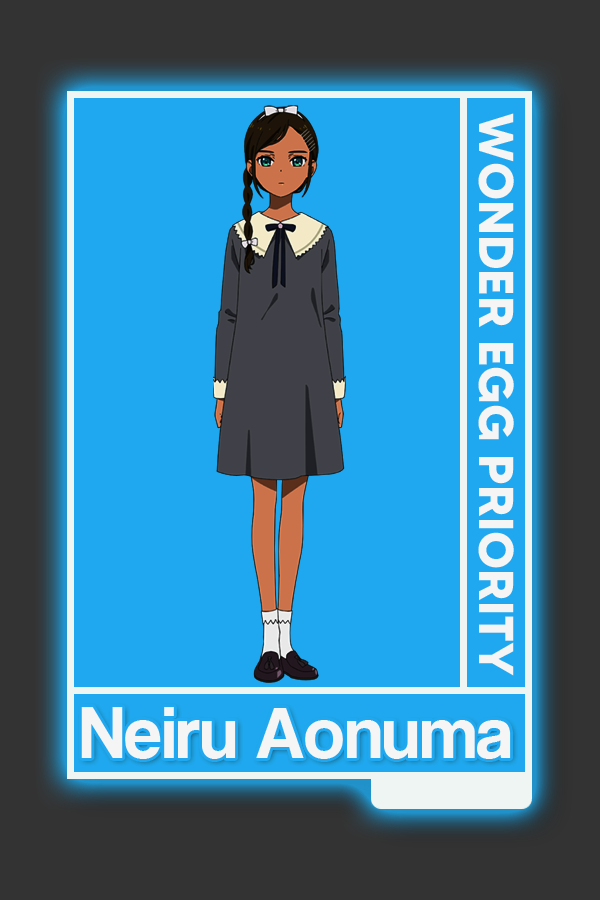
<style>
.page{position:relative;width:600px;height:900px;background:#1fa8ef}
.page>*{position:absolute;margin:0}
.t1{font:48.8px "MADETOMMY-Bold";color:#ffffff}
.t2{font:75px "CoolveticaRg-Regular";color:#ffffff}
</style>
<div class="page">
<p class="t1" style="left:478px;top:113px;width:36px;height:563px;rotate:90deg">WONDER EGG PRIORITY</p>
<p class="t2" style="left:81px;top:707px;width:430px;height:52px">Neiru Aonuma</p>
</div>
